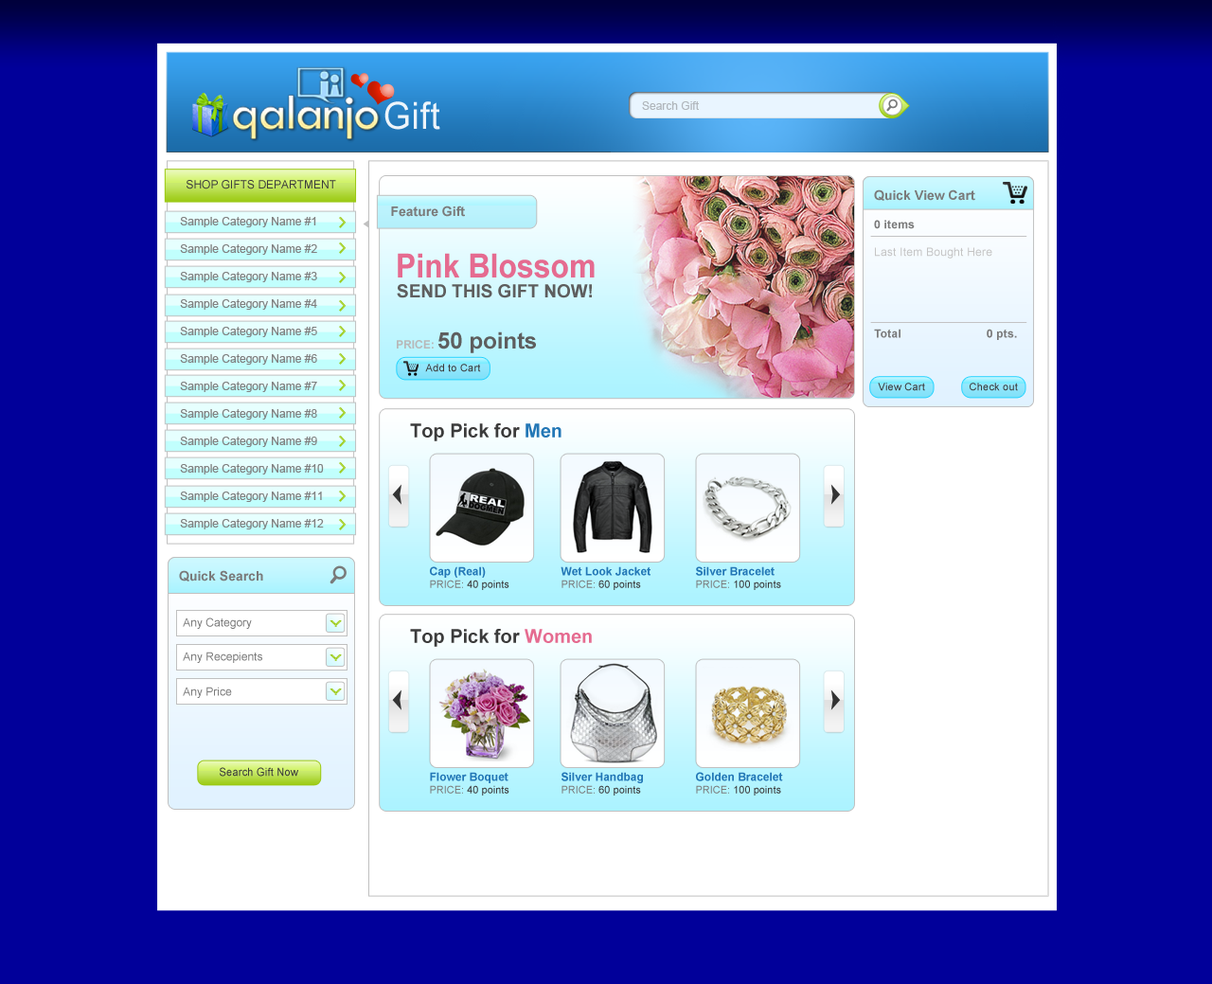
<style>
.page{position:relative;width:1212px;height:984px;background:#01009a}
.page>*{position:absolute;margin:0}
.t1{font:37.1px "ArialMT";letter-spacing:0.02em;color:#fefeff;scale:0.94 1}
.t2{font:11.4px "ArialMT";color:#b0b6bb}
.t3{font:11.4px "ArialMT";color:#3b3b3b}
.t4{font:13.3px "Arial-BoldMT";color:#7a7a7a}
.t5{font:11.4px/27.5px "ArialMT";color:#808080}
.t6{font:11.4px "ArialMT";letter-spacing:0.02em;color:#c4c4c4}
.t7{font:11.4px "Arial-BoldMT";letter-spacing:0.02em;color:#7a7a7a}
.t8{font:33.3px "Arial-BoldMT";color:#e56b90;scale:0.91 1}
.t9{font:18px "Arial-BoldMT";color:#5e5e5e}
.t10{font:22.7px "Arial-BoldMT";color:#5e5e5e}
.t11{font:11.4px "Arial-BoldMT";color:#b8b8b8}
.t12{font:10.4px "ArialMT";letter-spacing:0.02em;color:#3b3b3b}
.t13{font:18.9px "Arial-BoldMT";color:#3b3b3b}
.t14{font:18.9px "Arial-BoldMT";color:#2377b6}
.t15{font:11.4px "Arial-BoldMT";color:#2377b6}
.t16{font:10.4px "ArialMT";color:#7a7a7a}
.t17{font:10.4px "ArialMT";color:#3b3b3b}
.t18{font:11.4px "ArialMT";color:#7a7a7a}
.t19{font:18.9px "Arial-BoldMT";color:#e56b90}
.t20{font:11px "ArialMT";letter-spacing:0.02em;color:#3b3b3b;scale:0.94 1}
</style>
<div class="page">
<p class="t1" style="left:384px;top:101px;width:56px;height:29px;opacity:0.92">Gift</p>
<p class="t2" style="left:642px;top:101px;width:57px;height:9px">Search Gift</p>
<p class="t3" style="left:187px;top:180px;width:149px;height:9px">SHOP GIFTS DEPARTMENT</p>
<p class="t4" style="left:874px;top:189px;width:101px;height:12px">Quick View Cart</p>
<p class="t4" style="left:391px;top:205px;width:74px;height:12px">Feature Gift</p>
<p class="t5" style="left:180px;top:217px;width:144px;height:312px">Sample Category Name #1<br>Sample Category Name #2<br>Sample Category Name #3<br>Sample Category Name #4<br>Sample Category Name #5<br>Sample Category Name #6<br>Sample Category Name #7<br>Sample Category Name #8<br>Sample Category Name #9<br>Sample Category Name #10<br>Sample Category Name #11<br>Sample Category Name #12<br>Sample Category Name #1<br>Sample Category Name #1<br>Sample Category Name #1</p>
<p class="t6" style="left:874px;top:220px;width:143px;height:120px"><span class="t7">0 items<br><br></span>Last Item Bought Here<br><span class="t7"><br><br><br><br><br>Total      0 pts.</span></p>
<p class="t8" style="left:398px;top:253px;width:197px;height:25px">Pink Blossom</p>
<p class="t9" style="left:397px;top:284px;width:195px;height:14px">SEND THIS GIFT NOW!</p>
<p class="t10" style="left:397px;top:331px;width:139px;height:22px"><span class="t11">PRICE: </span>50 points</p>
<p class="t12" style="left:425px;top:364px;width:56px;height:8px">Add to Cart</p>
<p class="t12" style="left:878px;top:383px;width:47px;height:8px">View Cart</p>
<p class="t12" style="left:970px;top:383px;width:48px;height:8px">Check out</p>
<p class="t13" style="left:410px;top:423px;width:152px;height:18px">Top Pick for <span class="t14">Men</span></p>
<p class="t15" style="left:430px;top:566px;width:79px;height:24px">Cap (Real)<br><span class="t16">PRICE:</span><span class="t17"> 40 points</span></p>
<p class="t15" style="left:561px;top:566px;width:90px;height:24px">Wet Look Jacket<br><span class="t16">PRICE:</span><span class="t17"> 60 points</span></p>
<p class="t15" style="left:696px;top:566px;width:85px;height:24px">Silver Bracelet<br><span class="t16">PRICE:</span><span class="t17"> 100 points</span></p>
<p class="t4" style="left:179px;top:570px;width:84px;height:11px">Quick Search</p>
<p class="t18" style="left:183px;top:617px;width:69px;height:12px">Any Category</p>
<p class="t13" style="left:410px;top:629px;width:182px;height:18px">Top Pick for <span class="t19">Women</span></p>
<p class="t18" style="left:183px;top:651px;width:79px;height:12px">Any Recepients</p>
<p class="t18" style="left:183px;top:687px;width:49px;height:11px">Any Price</p>
<p class="t20" style="left:220px;top:767px;width:78px;height:9px">Search Gift Now</p>
<p class="t15" style="left:430px;top:772px;width:79px;height:23px">Flower Boquet<br><span class="t16">PRICE:</span><span class="t17"> 40 points</span></p>
<p class="t15" style="left:562px;top:772px;width:81px;height:23px">Silver Handbag<br><span class="t16">PRICE:</span><span class="t17"> 60 points</span></p>
<p class="t15" style="left:696px;top:772px;width:87px;height:23px">Golden Bracelet<br><span class="t16">PRICE:</span><span class="t17"> 100 points</span></p>
</div>
